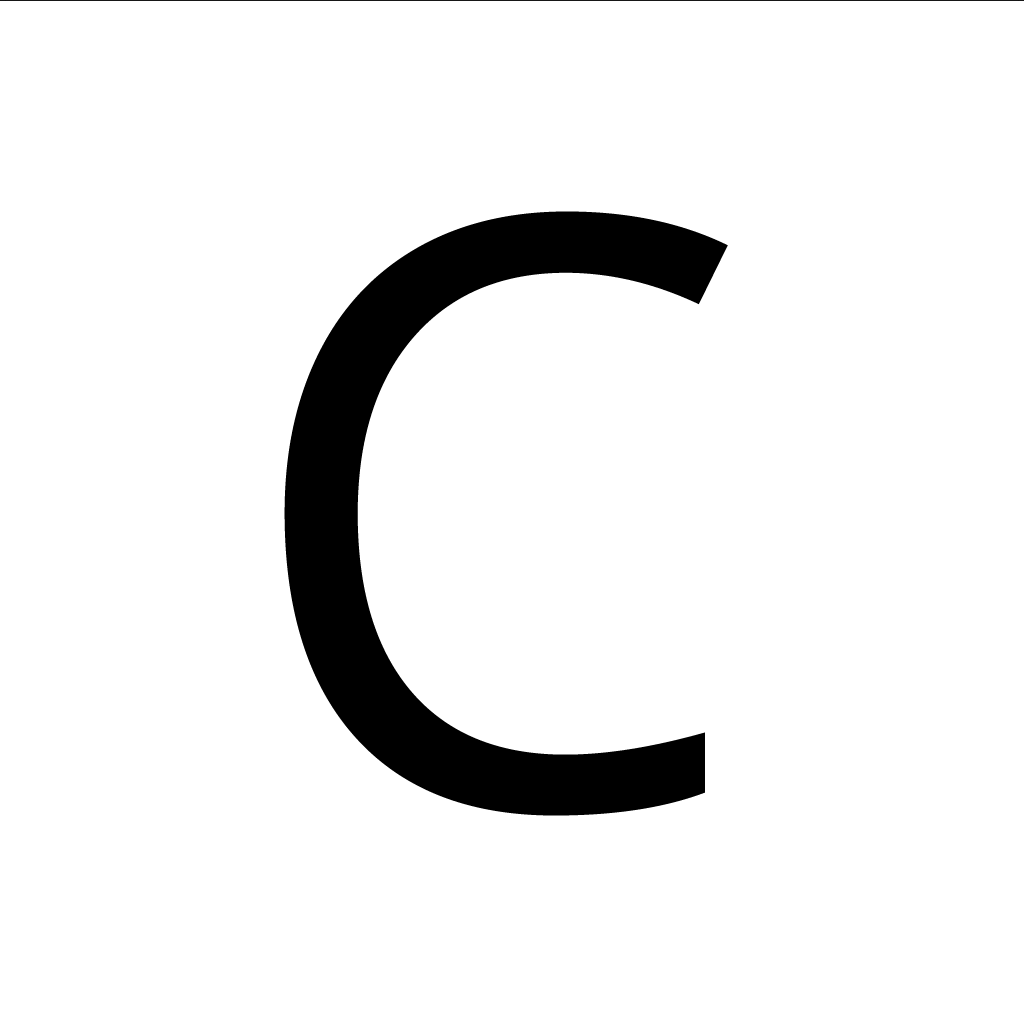
<style>
.page{position:relative;width:1024px;height:1024px;background:#ffffff}
.page>*{position:absolute;margin:0}
.t1{font:822.7px "OpenSans";color:#000000}
</style>
<div class="page">
<p class="t1" style="left:284px;top:210px;width:444px;height:605px">C</p>
</div>
